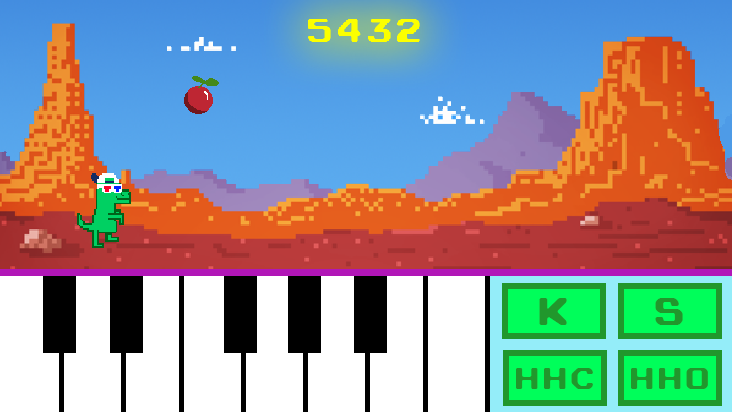
<style>
.page{position:relative;width:732px;height:412px}
.page>*{position:absolute;margin:0}
.t1{font:31.7px "ArcadeRounded";letter-spacing:0.13em;color:#21972c}
.t2{font:25px "ArcadeRounded";letter-spacing:0.13em;color:#21972c}
</style>
<div class="page">
<p class="t1" style="left:539px;top:298px;width:28px;height:27px">k</p>
<p class="t1" style="left:655px;top:298px;width:28px;height:27px">S</p>
<p class="t2" style="left:516px;top:368px;width:77px;height:21px">HHC</p>
<p class="t2" style="left:631px;top:368px;width:77px;height:21px">HHo</p>
</div>
